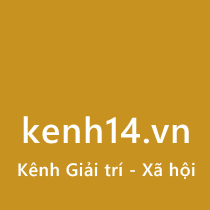
<style>
.page{position:relative;width:210px;height:210px;background:#c79220}
.page>*{position:absolute;margin:0}
.t1{font:36px "SegoeWP-Semibold";letter-spacing:0.025em;color:#ffffff}
.t2{font:18px "SegoeWP-Semibold";letter-spacing:0.025em;color:#ffffff}
</style>
<div class="page">
<p class="t1" style="left:23px;top:116px;width:166px;height:28px">kenh14.vn</p>
<p class="t2" style="left:18px;top:162px;width:177px;height:17px">Kênh Giải trí - Xã hội</p>
</div>
